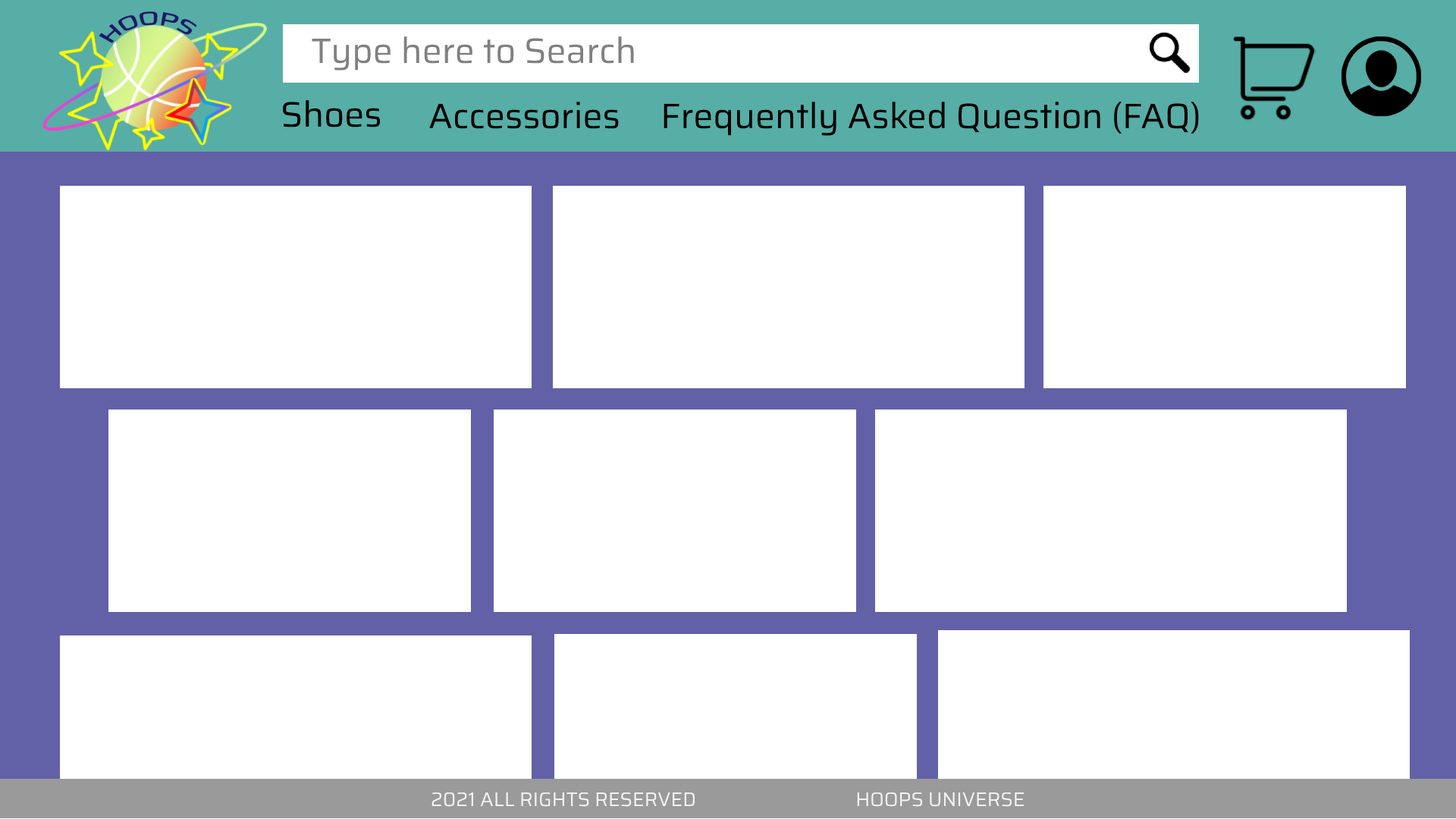
<style>
.page{position:relative;width:1456px;height:819px;background:#ffffff}
.page>*{position:absolute;margin:0}
.t1{font:35.4px "Saira-Regular";color:#808080}
.t2{font:35.4px "Saira-Regular";color:#000000}
.t3{font:19.7px "Saira-Regular";color:#f2f2f2}
</style>
<div class="page">
<p class="t1" style="left:312px;top:36px;width:322px;height:35px">Type here to Search</p>
<p class="t2" style="left:283px;top:100px;width:97px;height:27px">Shoes</p>
<p class="t2" style="left:429px;top:102px;width:190px;height:27px">Accessories</p>
<p class="t2" style="left:664px;top:102px;width:535px;height:34px">Frequently Asked Question (FAQ)</p>
<p class="t3" style="left:431px;top:792px;width:593px;height:15px">2021 ALL RIGHTS RESERVED   HOOPS UNIVERSE</p>
</div>
